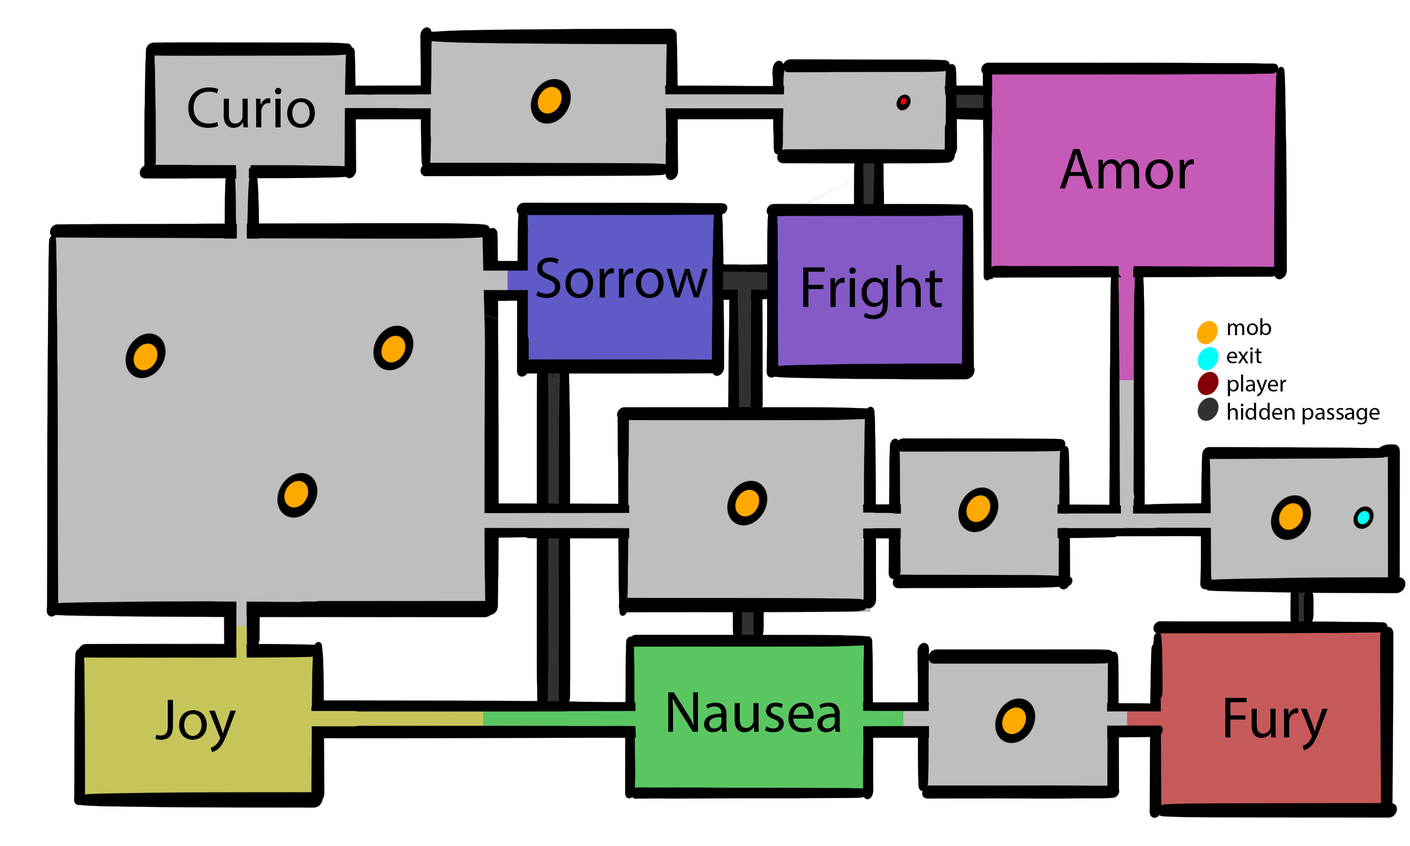
<style>
.page{position:relative;width:1410px;height:846px;background:#ffffff}
.page>*{position:absolute;margin:0}
.t1{font:58.7px "MyriadPro-Regular";color:#000000}
.t2{font:23.5px "MyriadPro-Regular";color:#000000}
</style>
<div class="page">
<p class="t1" style="left:188px;top:87px;width:127px;height:41px">Curio</p>
<p class="t1" style="left:1060px;top:149px;width:134px;height:40px">Amor</p>
<p class="t1" style="left:536px;top:258px;width:172px;height:40px">Sorrow</p>
<p class="t1" style="left:803px;top:265px;width:139px;height:55px">Fright</p>
<p class="t2" style="left:1226px;top:318px;width:154px;height:106px">mob<br>exit<br>player<br>hidden passage</p>
<p class="t1" style="left:155px;top:700px;width:81px;height:52px">Joy</p>
<p class="t1" style="left:668px;top:692px;width:172px;height:41px">Nausea</p>
<p class="t1" style="left:1225px;top:697px;width:103px;height:53px">Fury</p>
</div>
